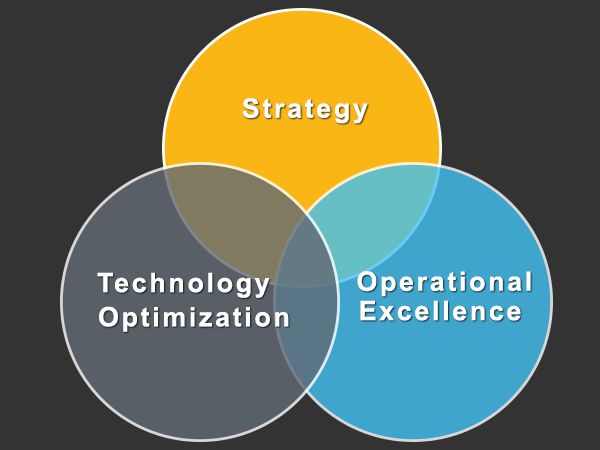
<style>
.page{position:relative;width:600px;height:450px;background:#333333}
.page>*{position:absolute;margin:0}
.t1{font:26.8px "Arial-BoldMT";letter-spacing:0.1em;color:#ffffff}
</style>
<div class="page">
<p class="t1" style="left:242px;top:98px;width:126px;height:26px">Strategy</p>
<p class="t1" style="left:97px;top:272px;width:173px;height:26px">Technology</p>
<p class="t1" style="left:357px;top:271px;width:174px;height:26px">Operational</p>
<p class="t1" style="left:360px;top:300px;width:161px;height:21px">Excellence</p>
<p class="t1" style="left:99px;top:306px;width:190px;height:26px">Optimization</p>
</div>
